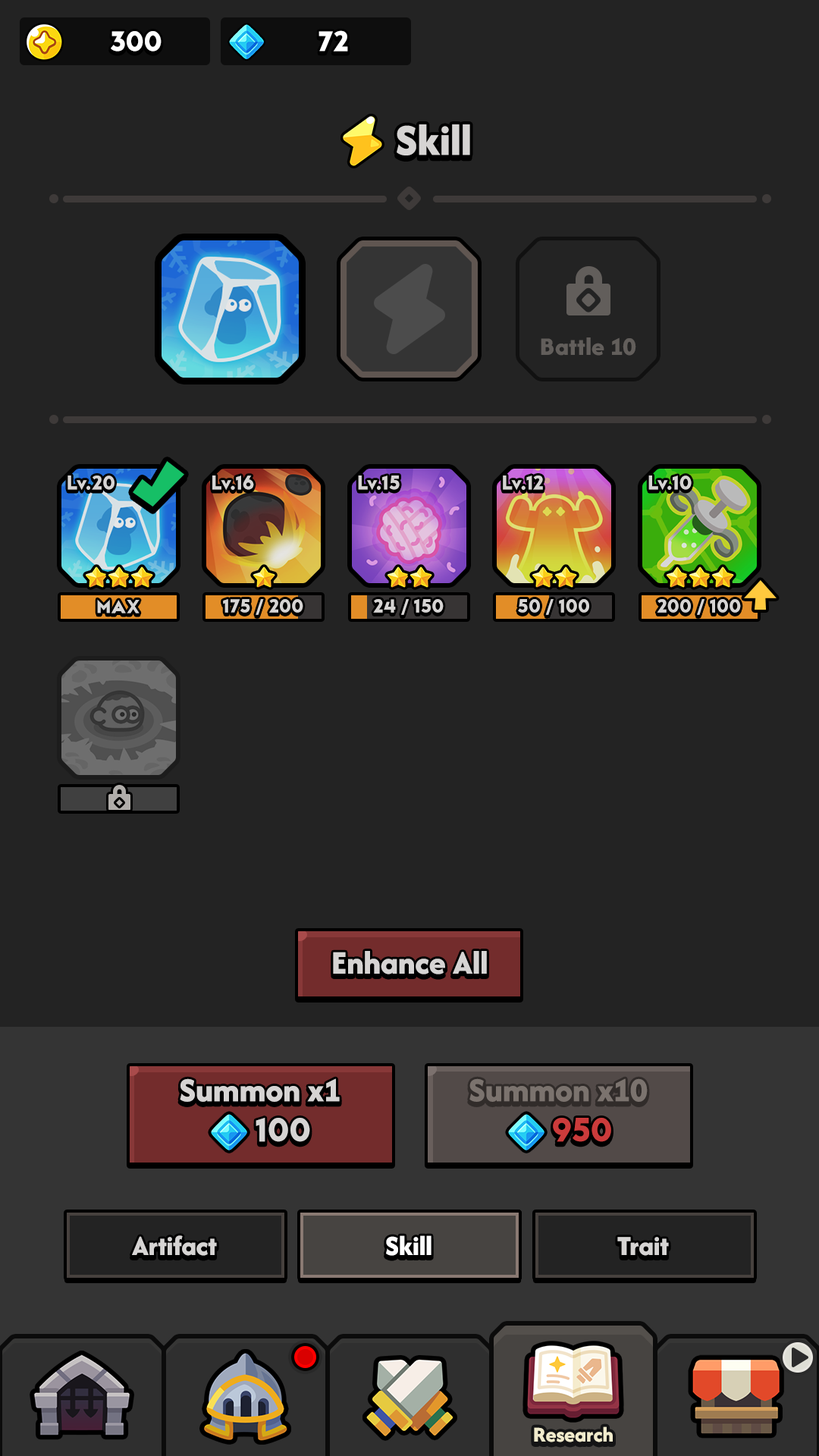
<style>
.page{position:relative;width:819px;height:1456px;background:#232323}
.page>*{position:absolute;margin:0}
.t1{font:29.6px "LTAvocado-Bold";color:#ffffff}
.t2{font:45.5px "AfacadFlux-ExtraBold";color:#d6d4d3}
.t3{font:26.2px "AfacadFlux-ExtraBold";color:#625e5b}
.t4{font:20.5px "LTAvocado-Bold";color:#d6d4d3}
.t5{font:19.7px "LTAvocado-Bold";color:#d6d4d3;text-transform:uppercase}
.t6{font:34.1px "AfacadFlux-ExtraBold";color:#d6d4d3}
.t7{font:34.9px "AfacadFlux-ExtraBold";color:#d6d4d3}
.t8{font:34.9px "AfacadFlux-ExtraBold";color:#7b736e}
.t9{font:34.9px "LTAvocado-Bold";color:#d6d4d3}
.t10{font:34.9px "LTAvocado-Bold";color:#cb3b3b}
.t11{font:28.8px "AfacadFlux-ExtraBold";color:#d6d4d3}
.t12{font:28.8px "AfacadFlux-ExtraBold";color:#ffffff}
.t13{font:22px "AfacadFlux-ExtraBold";color:#f1ebcc}
</style>
<div class="page">
<p class="t1" style="left:111px;top:31px;width:51px;height:21px">300</p>
<p class="t1" style="left:318px;top:30px;width:30px;height:22px">72</p>
<p class="t2" style="left:397px;top:124px;width:73px;height:31px">Skill</p>
<p class="t3" style="left:541px;top:337px;width:95px;height:19px">Battle 10</p>
<p class="t4" style="left:67px;top:475px;width:48px;height:15px">Lv.20</p>
<p class="t4" style="left:212px;top:475px;width:42px;height:15px">Lv.16</p>
<p class="t4" style="left:358px;top:475px;width:42px;height:15px">Lv.15</p>
<p class="t4" style="left:503px;top:475px;width:40px;height:15px">Lv.12</p>
<p class="t4" style="left:648px;top:475px;width:44px;height:15px">Lv.10</p>
<p class="t5" style="left:97px;top:599px;width:43px;height:14px">Max</p>
<p class="t5" style="left:223px;top:599px;width:80px;height:16px">175 / 200</p>
<p class="t5" style="left:373px;top:599px;width:71px;height:16px">24 / 150</p>
<p class="t5" style="left:518px;top:599px;width:71px;height:16px">50 / 100</p>
<p class="t5" style="left:657px;top:599px;width:84px;height:16px">200 / 100</p>
<p class="t6" style="left:333px;top:951px;width:154px;height:23px">Enhance All</p>
<p class="t7" style="left:180px;top:1078px;width:160px;height:24px">Summon x1</p>
<p class="t8" style="left:469px;top:1078px;width:179px;height:24px">Summon x10</p>
<p class="t9" style="left:256px;top:1118px;width:54px;height:24px">100</p>
<p class="t10" style="left:553px;top:1118px;width:58px;height:24px">950</p>
<p class="t11" style="left:132px;top:1235px;width:85px;height:21px">Artifact</p>
<p class="t12" style="left:386px;top:1235px;width:45px;height:21px">Skill</p>
<p class="t12" style="left:386px;top:1235px;width:45px;height:21px">Skill</p>
<p class="t11" style="left:617px;top:1237px;width:52px;height:19px">Trait</p>
<p class="t13" style="left:534px;top:1426px;width:79px;height:16px">Research</p>
</div>
